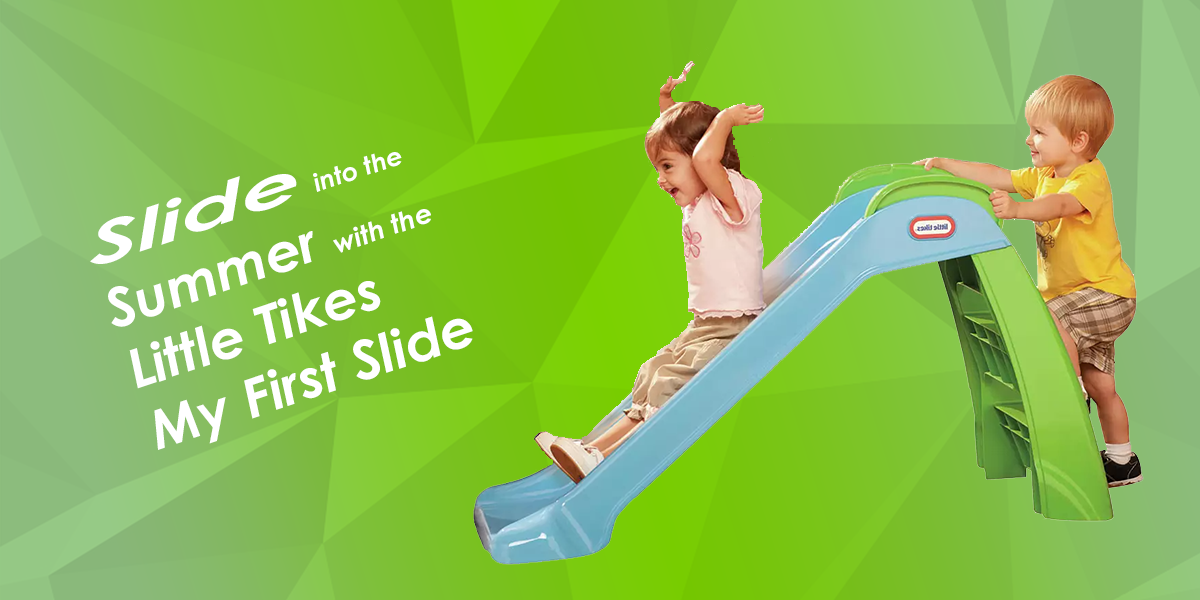
<style>
.page{position:relative;width:1200px;height:600px}
.page>*{position:absolute;margin:0}
.t1{font:53.8px "CenturyGothic-BoldItalic";color:#ffffff;scale:1.03 1}
.t2{font:53.8px "CenturyGothic-BoldItalic";color:#ffffff;font-style:italic;scale:1.8 1}
.t3{font:24.9px "CenturyGothic-BoldItalic";color:#ffffff;scale:1.03 1}
.t4{font:26.5px "CenturyGothic-BoldItalic";color:#ffffff;scale:1.03 1}
</style>
<div class="page">
<p class="t1" style="left:90px;top:152px;width:383px;height:298px;rotate:-19deg"><span class="t2">Slide </span><span class="t3">into the</span> <br>Summer <span class="t4">with the</span> <br>Little Tikes<br>My First Slide</p>
</div>
